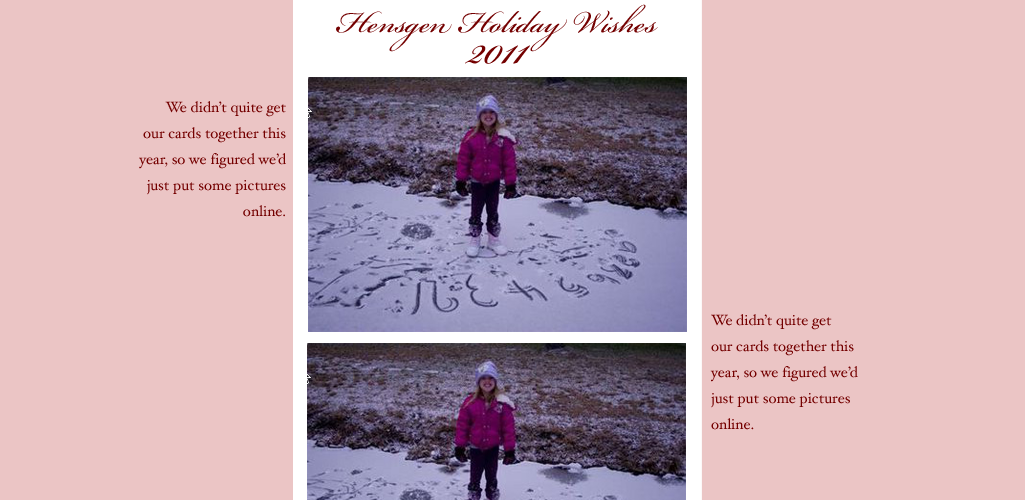
<style>
.page{position:relative;width:1025px;height:500px;background:#ebc5c5}
.page>*{position:absolute;margin:0}
.t1{font:47.8px/25.9px "BickhamScriptPro-Regular";color:#740000}
.t2{font:65.8px/30.9px "BickhamScriptPro-Regular";color:#740000}
.t3{font:14.9px/25.9px "HoeflerText-Regular";color:#740000}
</style>
<div class="page">
<p class="t1" style="left:336px;top:4px;width:322px;height:60px;text-align:center">Hensgen Holiday Wishes<br><span class="t2">2011</span></p>
<p class="t3" style="left:139px;top:101px;width:147px;height:116px;text-align:right">We didn’t quite get<br>our cards together this<br>year, so we figured we’d<br>just put some pictures<br>online.</p>
<p class="t3" style="left:710px;top:314px;width:148px;height:116px">We didn’t quite get<br>our cards together this<br>year, so we figured we’d<br>just put some pictures<br>online.</p>
</div>
